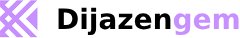
<style>
.page{position:relative;width:240px;height:38px;background:#ffffff}
.page>*{position:absolute;margin:0}
.t1{font:28px "DejaVuSans-Bold";color:#000000}
.t2{font:28px "DejaVuSans-Bold";color:#c890ff}
</style>
<div class="page">
<p class="t1" style="left:58px;top:7px;width:181px;height:29px">Dijazen<span class="t2">gem</span></p>
</div>
